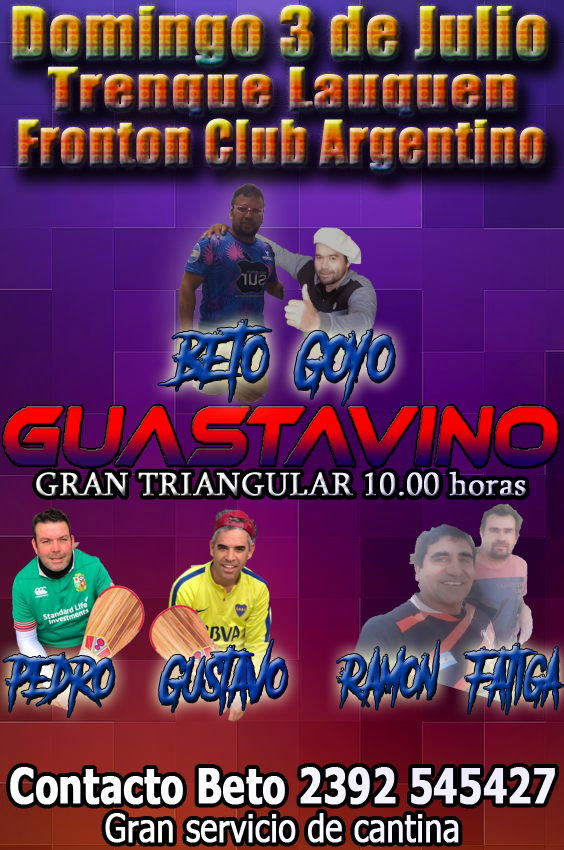
<style>
.page{position:relative;width:564px;height:850px}
.page>*{position:absolute;margin:0}
.t1{font:66.3px "Impact";font-weight:bold}
.t2{font:54.5px "Impact";font-weight:bold;scale:1.16 1}
.t3{font:58.2px "Impact";font-weight:bold;scale:0.91 1}
.t4{font:59.6px "AnotherDangerDemo";font-weight:bold;scale:0.8 1}
.t5{font:33px "Sylfaen";font-weight:bold}
.t6{font:50.6px "AnotherDangerDemo";font-weight:bold;scale:0.75 1}
.t7{font:51.4px "AnotherDangerDemo";font-weight:bold;scale:0.69 1}
.t8{font:48.2px "Tahoma-Bold";color:#ffffff;font-weight:bold;scale:0.77 1}
.t9{font:38.5px "Tahoma";color:#ffffff;font-weight:bold;scale:0.82 1}
</style>
<div class="page">
<p class="t1" style="left:12px;top:5px;width:537px;height:63px">Domingo 3 de Julio</p>
<p class="t2" style="left:48px;top:66px;width:469px;height:51px">Trenque Lauquen</p>
<p class="t3" style="left:18px;top:118px;width:528px;height:56px">Fronton Club Argentino</p>
<p class="t4" style="left:158px;top:319px;width:237px;height:87px">Beto  Goyo</p>
<p class="t5" style="left:36px;top:471px;width:490px;height:25px">GRAN TRIANGULAR 10.00 horas</p>
<p class="t6" style="left:3px;top:639px;width:285px;height:78px">Pedro    Gustavo</p>
<p class="t7" style="left:337px;top:640px;width:227px;height:75px">Ramon   Fatiga</p>
<p class="t8" style="left:10px;top:767px;width:545px;height:38px">Contacto Beto 2392 545427</p>
<p class="t9" style="left:105px;top:813px;width:354px;height:30px">Gran servicio de cantina</p>
</div>
